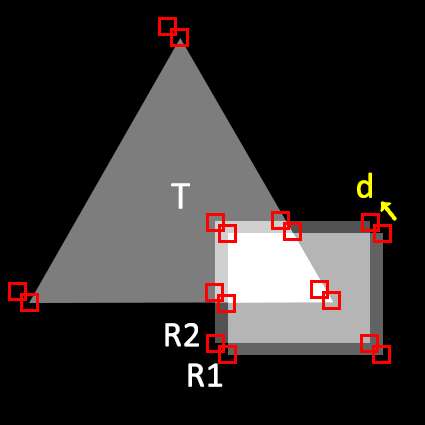
<style>
.page{position:relative;width:425px;height:425px;background:#000000}
.page>*{position:absolute;margin:0}
.t1{font:36px "Calibri";letter-spacing:-0.015em;color:#ffff00;font-weight:bold}
.t2{font:40px "Calibri";letter-spacing:-0.015em;color:#ffffff;font-weight:bold}
.t3{font:36px "Calibri";letter-spacing:-0.015em;color:#ffffff;font-weight:bold}
</style>
<div class="page">
<p class="t1" style="left:357px;top:172px;width:15px;height:26px">d</p>
<p class="t2" style="left:171px;top:183px;width:20px;height:26px">T</p>
<p class="t3" style="left:165px;top:323px;width:34px;height:24px">R2</p>
<p class="t3" style="left:188px;top:363px;width:35px;height:24px">R1</p>
</div>
